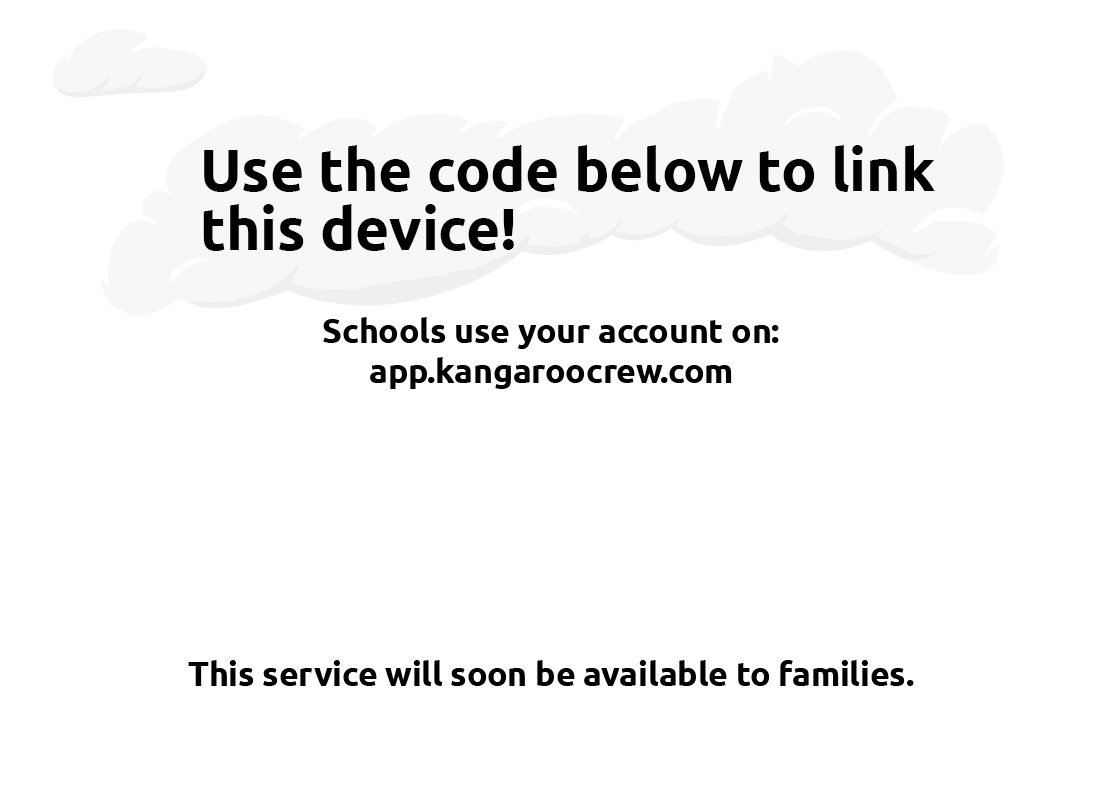
<style>
.page{position:relative;width:1102px;height:802px;background:#ffffff}
.page>*{position:absolute;margin:0}
.t1{font:58.5px/58.5px "Ubuntu-Bold";color:#000000}
.t2{font:33.5px/20.2px "Ubuntu-Bold";color:#000000}
.t3{font:33.5px "Ubuntu-Bold";color:#000000}
</style>
<div class="page">
<p class="t1" style="left:203px;top:145px;width:732px;height:106px">Use the code below to link<br>this device!</p>
<p class="t2" style="left:188px;top:317px;width:726px;height:369px;text-align:center"><span class="t3">Schools use your account on:<br></span><br>app.kangaroocrew.com<br><br><br><br><br><br><br><br><br><br><br><br><br><br>This service will soon b<span class="t3">e available to families.</span></p>
</div>
